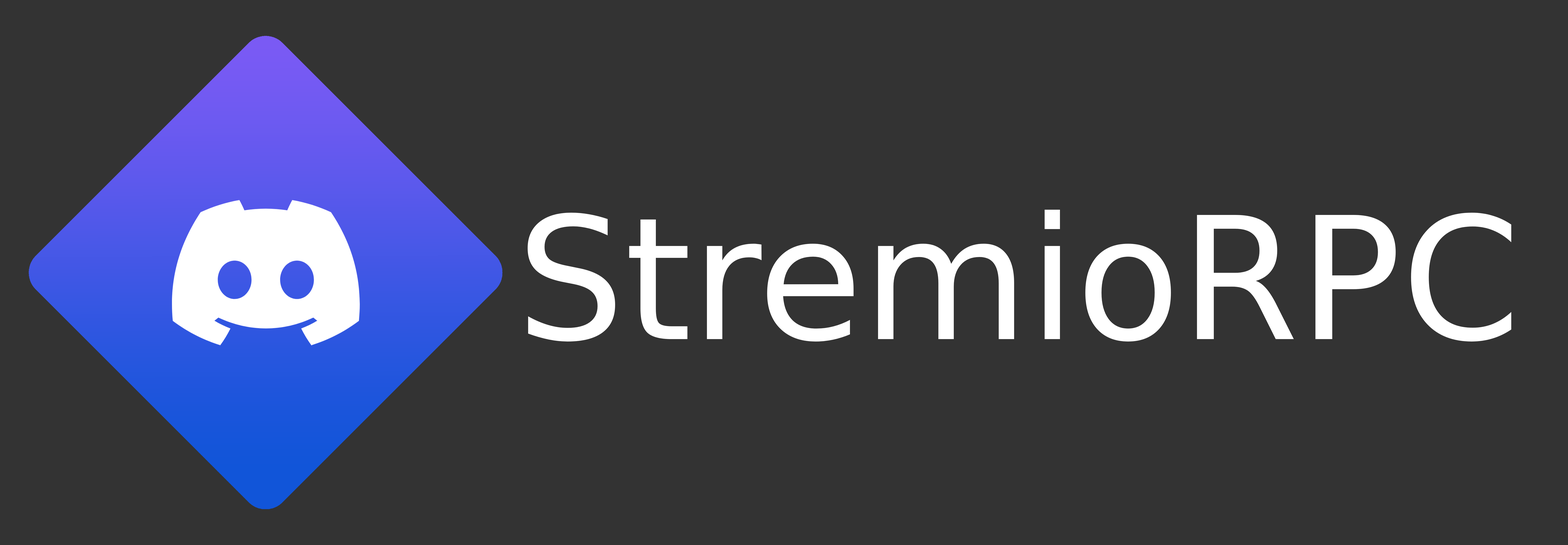
<style>
.page{position:relative;width:1568px;height:545px;background:#333333}
.page>*{position:absolute;margin:0}
.t1{font:170.4px "DejaVuSans";color:#ffffff}
</style>
<div class="page">
<p class="t1" style="left:527px;top:210px;width:984px;height:132px">StremioRPC</p>
</div>
